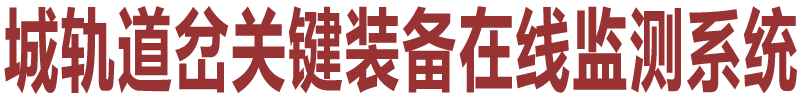
<style>
.page{position:relative;width:800px;height:100px;background:#ffffff}
.page>*{position:absolute;margin:0}
.t1{font:88.8px "MicrosoftYaHei-Bold";letter-spacing:0.05em;color:#993333;scale:0.61 1}
</style>
<div class="page">
<p class="t1" style="left:4px;top:6px;width:793px;height:88px">城轨道岔关键装备在线监测系统</p>
</div>
